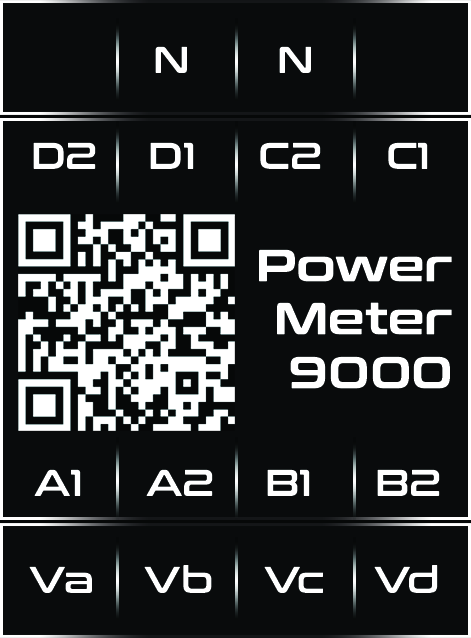
<style>
.page{position:relative;width:471px;height:638px;background:#090b0c}
.page>*{position:absolute;margin:0}
.t1{font:37.5px "ConthraxSb-Regular";color:#ffffff}
.t2{font:44.7px "ConthraxSb-Regular";color:#ffffff;font-weight:bold}
</style>
<div class="page">
<p class="t1" style="left:155px;top:46px;width:156px;height:27px">N       N</p>
<p class="t1" style="left:33px;top:142px;width:395px;height:27px">D2    D1     C2     C1</p>
<p class="t2" style="left:259px;top:249px;width:193px;height:140px;text-align:right">Power<br>Meter<br>9000</p>
<p class="t1" style="left:34px;top:469px;width:406px;height:27px">A1     A2    B1     B2</p>
<p class="t1" style="left:29px;top:565px;width:409px;height:28px">Va    Vb    Vc    Vd</p>
</div>
